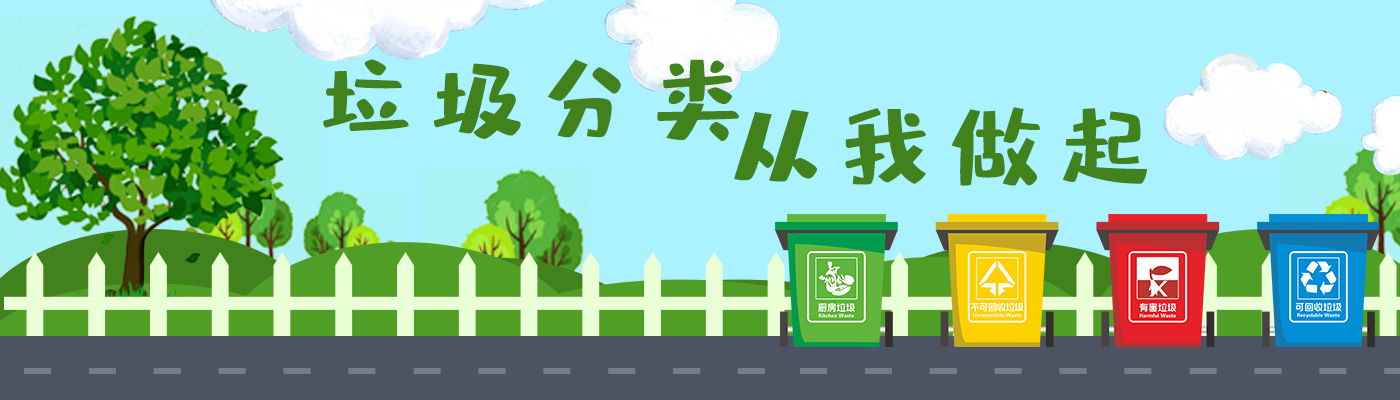
<style>
.page{position:relative;width:1400px;height:400px;background:#aaf2ff}
.page>*{position:absolute;margin:0}
.t1{font:92px "zihun27hao-budingti";letter-spacing:0.2em;color:#41821d;text-transform:uppercase}
</style>
<div class="page">
<p class="t1" style="left:323px;top:59px;width:416px;height:82px">垃圾分类</p>
<p class="t1" style="left:734px;top:107px;width:413px;height:79px">从我做起</p>
</div>
